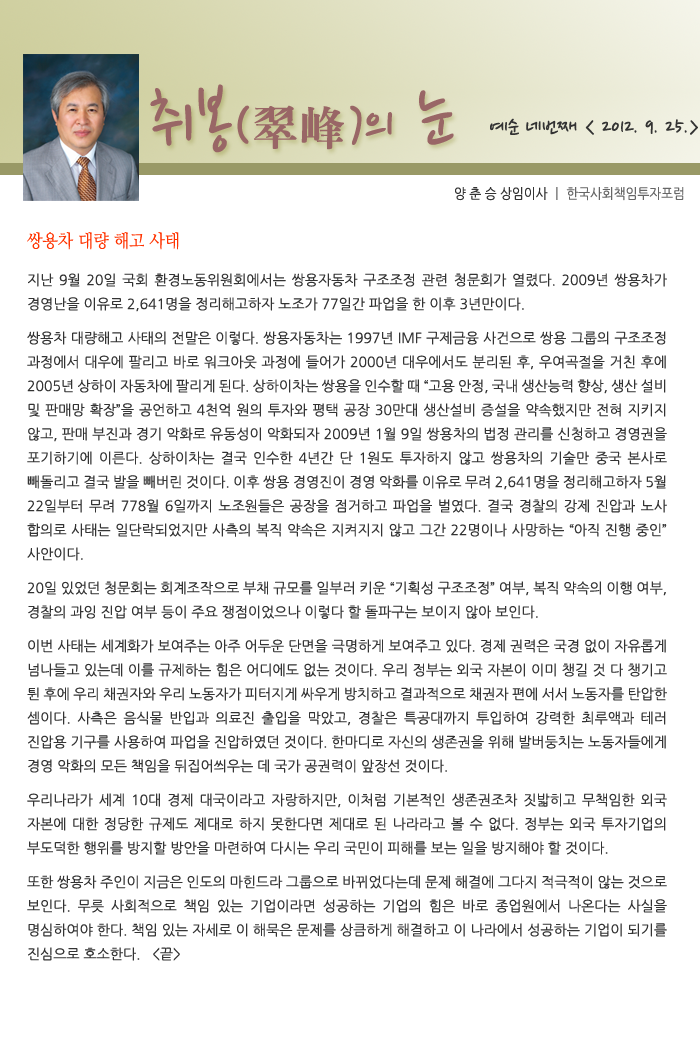
<style>
.page{position:relative;width:700px;height:1061px;background:#ffffff}
.page>*{position:absolute;margin:0}
.t1{font:77.5px "NanumPen";color:#996666}
.t2{font:60px "NanumPen";color:#996666}
.t3{font:48px "H2mjrE";color:#996666}
.t4{font:24px "NanumPen";color:#333333}
.t5{font:14px "NanumGothic";color:#666666;scale:0.9 1}
.t6{font:14px "NanumGothic";color:#333333;scale:0.9 1}
.t7{font:18px "NanumMyeongjo";color:#ff3300;scale:0.9 1}
.t8{font:14px/24px "NanumGothic";color:#333333}
.t9{font:14px/10px "NanumGothic";color:#333333}
</style>
<div class="page">
<p class="t1" style="left:150px;top:84px;width:304px;height:69px">취봉<span class="t2">(</span><span class="t3">翠峰</span><span class="t2">)</span><span class="t2">의</span> 눈</p>
<p class="t4" style="left:490px;top:118px;width:208px;height:17px">예순 네번째 &lt; 2012. 9. 25.&gt;</p>
<p class="t5" style="left:455px;top:187px;width:229px;height:14px"><span class="t6">양 춘 승 상임이사 </span>ㅣ 한국사회책임투자포럼</p>
<p class="t7" style="left:27px;top:232px;width:152px;height:18px">쌍용차 대량 해고 사태</p>
<p class="t8" style="left:27px;top:273px;width:640px;height:688px;text-align:justify">지난 9월 20일 국회 환경노동위원회에서는 쌍용자동차 구조조정 관련 청문회가 열렸다. 2009년 쌍용차가 경영난을 이유로 2<span class="t9">,641명을 정리해고하자 노조가 77일간 파업을 한 이후 3년만이다.<br> <br>쌍용차 대량해고 사태</span>의 전말은 이렇다. 쌍용자동차는 1997년 IMF 구제금융 사건으로 쌍용 그룹의 구조조정 과정에서 대우에 팔리고 바로 워크아웃 과정에 들어가 2000년 대우에서도 분리된 후, 우여곡절을 거친 후에 2005년 상하이 자동차에 팔리게 된다. 상하이차는 쌍용을 인수할 때 “고용 안정, 국내 생산능력 향상, 생산 설비 및 판매망 확장”을 공언하고 4천억 원의 투자와 평택 공장 30만대 생산설비 증설을 약속했지만 전혀 지키지 않고, 판매 부진과 경기 악화로 유동성이 악화되자 2009년 1월 9일 쌍용차의 법정 관리를 신청하고 경영권을 포기하기에 이른다. 상하이차는 결국 인수한 4년간 단 1원도 투자하지 않고 쌍용차의 기술만 중국 본사로 빼돌리고 결국 발을 빼버린 것이다. 이후 쌍용 경영진이 경영 악화를 이유로 무려 2,641명을 정리해고하자 5월 22일부터 무려 778월 6일까지 노조원들은 공장을 점거하고 파업을 벌였다. 결국 경찰의 강제 진압과 노사 합의로 사태는 일단락되었지만 사측의 복직 약속은 지켜지지 않고 그간 22명이나 사망하는 “아직 진행 중인” 사안<span class="t9">이다.<br><br>20일 있</span>었던 청문회는 회계조작으로 부채 규모를 일부러 키운 “기획성 구조조정” 여부, 복직 약속의 이행 여부, 경찰의 과잉 진압 여<span class="t9">부 등이 주요 쟁점이었으나 이렇다 할 돌파구는 보이지 않아 보인다.<br> <br>이번 사태는 세계화가</span> 보여주는 아주 어두운 단면을 극명하게 보여주고 있다. 경제 권력은 국경 없이 자유롭게 넘나들고 있는데 이를 규제하는 힘은 어디에도 없는 것이다. 우리 정부는 외국 자본이 이미 챙길 것 다 챙기고 튄 후에 우리 채권자와 우리 노동자가 피터지게 싸우게 방치하고 결과적으로 채권자 편에 서서 노동자를 탄압한 셈이다. 사측은 음식물 반입과 의료진 출입을 막았고, 경찰은 특공대까지 투입하여 강력한 최루액과 테러 진압용 기구를 사용하여 파업을 진압하였던 것이다. 한마디로 자신의 생존권을 위해 발버둥치는 노동자들에게 경영 악화의 모든 책임을 뒤집<span class="t9">어씌우는 데 국가 공권력이 앞장선 것이다. <br><br>우리나라가 세계 10대 경제 대국</span>이라고 자랑하지만, 이처럼 기본적인 생존권조차 짓밟히고 무책임한 외국 자본에 대한 정당한 규제도 제대로 하지 못한다면 제대로 된 나라라고 볼 수 없다. 정부는 외국 투자기업의 부도덕한 행위<span class="t9">를 방지할 방안을 마련하여 다시는 우리 국민이 피해를 보는 일을 방지해야 할 것이다.<br> <br>또한 쌍용차 주인이</span> 지금은 인도의 마힌드라 그룹으로 바뀌었다는데 문제 해결에 그다지 적극적이 않는 것으로 보인다. 무릇 사회적으로 책임 있는 기업이라면 성공하는 기업의 힘은 바로 종업원에서 나온다는 사실을 명심하여야 한다. 책임 있는 자세로 이 해묵은 문제를 상큼하게 해결하고 이 나라에서 성공하는 기업이 되기를 진심으로 호소한다.   &lt;끝&gt;</p>
</div>
